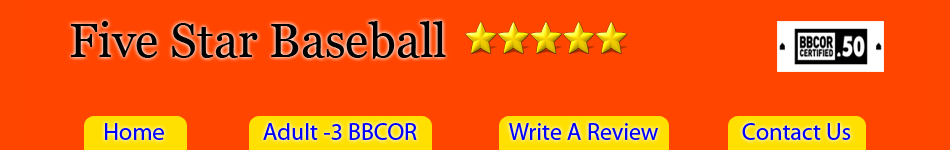
<style>
.page{position:relative;width:950px;height:150px;background:#ff4500}
.page>*{position:absolute;margin:0}
.t1{font:48px "Georgia";color:#000000}
.t2{font:24px "MyriadPro-Regular";color:#0000ff}
</style>
<div class="page">
<p class="t1" style="left:71px;top:21px;width:375px;height:38px">Five Star Baseball</p>
<p class="t2" style="left:105px;top:123px;width:59px;height:17px">Home</p>
<p class="t2" style="left:263px;top:123px;width:154px;height:17px">Adult -3 BBCOR</p>
<p class="t2" style="left:509px;top:123px;width:149px;height:17px">Write A Review</p>
<p class="t2" style="left:742px;top:123px;width:109px;height:17px">Contact Us</p>
</div>
